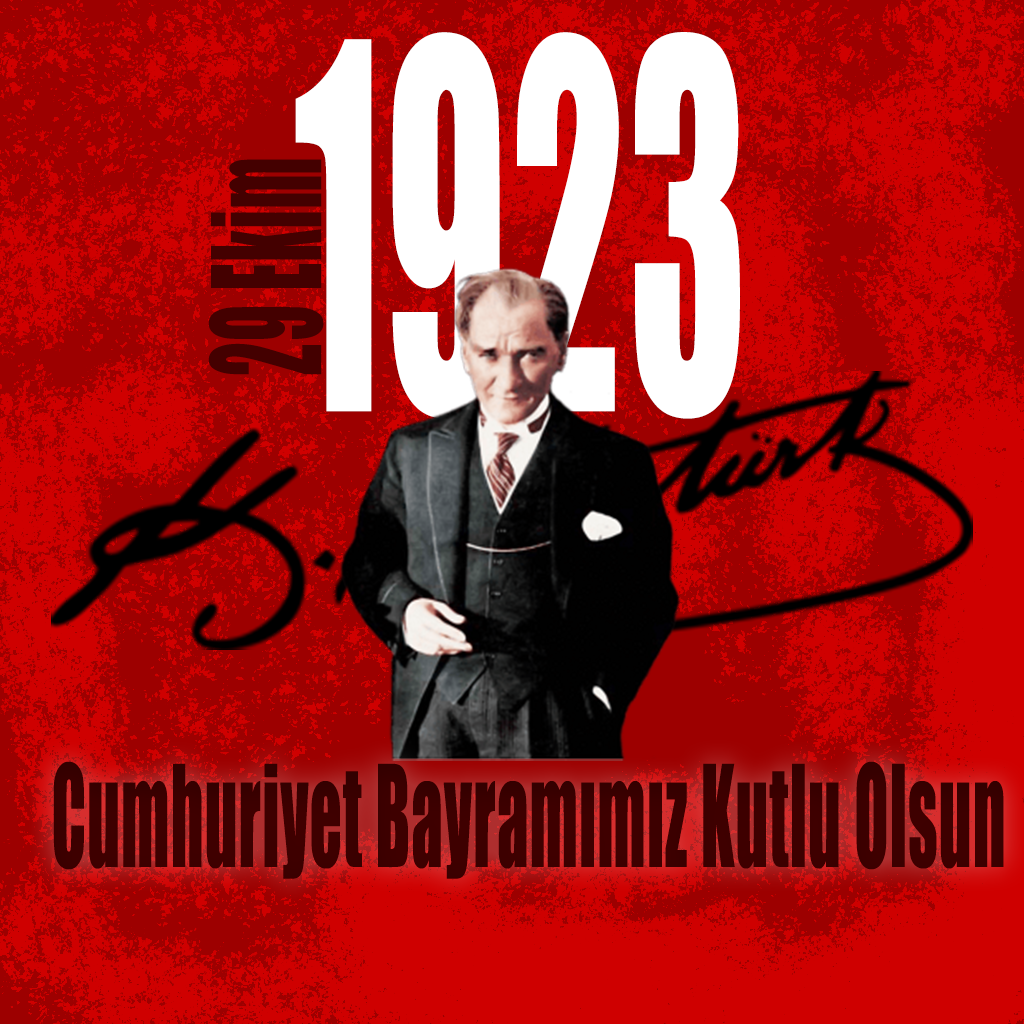
<style>
.page{position:relative;width:1024px;height:1024px;background:#9d0000}
.page>*{position:absolute;margin:0}
.t1{font:470.2px "Impact";letter-spacing:0.02em;color:#ffffff;scale:0.48 1}
.t2{font:139.3px "Impact";letter-spacing:0.02em;color:#440000;scale:0.48 1}
.t3{font:130.6px "Impact";letter-spacing:0.02em;color:#440000;scale:0.48 1}
</style>
<div class="page">
<p class="t1" style="left:295px;top:32px;width:445px;height:387px">1923</p>
<p class="t2" style="left:208px;top:159px;width:116px;height:216px;rotate:-90deg">29 Ekim</p>
<p class="t3" style="left:53px;top:761px;width:951px;height:118px">Cumhuriyet Bayramımız Kutlu Olsun</p>
</div>
